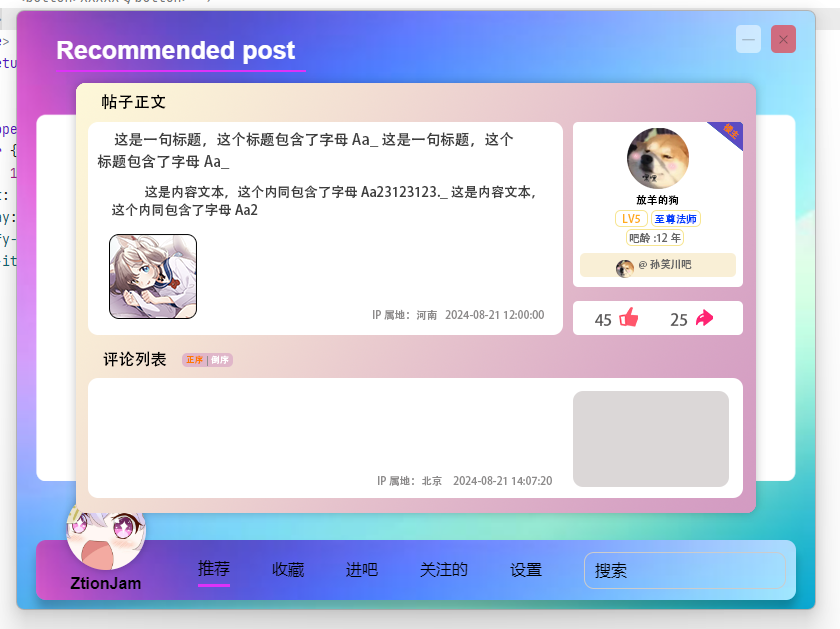
<style>
.page{position:relative;width:840px;height:629px;background:#ffffff}
.page>*{position:absolute;margin:0}
.t1{font:16px "AdobeHeitiStd-Regular";color:#010001}
.t2{font:8.7px "AdobeHeitiStd-Regular";color:#ff7800}
.t3{font:14.7px/22.7px "AdobeHeitiStd-Regular";color:#3e3e3e}
.t4{font:13.3px/18.7px "AdobeHeitiStd-Regular";color:#3e3e3e}
.t5{font:10.7px "AdobeHeitiStd-Regular";color:#000000}
.t6{font:10.7px "AdobeHeitiStd-Regular";color:#ffac1b}
.t7{font:10.7px "AdobeHeitiStd-Regular";color:#003cfe}
.t8{font:10.7px "AdobeHeitiStd-Regular";color:#666666}
.t9{font:10.7px "AdobeHeitiStd-Regular";color:#8d8b8b}
.t10{font:12px "AdobeHeitiStd-Regular";color:#595757}
.t11{font:8.5px "AdobeHeitiStd-Regular";color:#ff7800}
.t12{font:8.5px "AdobeHeitiStd-Regular";color:#ffffff}
</style>
<div class="page">
<p class="t1" style="left:102px;top:94px;width:64px;height:16px">帖子正文</p>
<p class="t2" style="left:723px;top:123px;width:16px;height:17px;rotate:41deg">楼主</p>
<p class="t3" style="left:97px;top:132px;width:417px;height:37px">这是一句标题，这个标题包含了字母Aa_这是一句标题，这个<br>标题包含了字母Aa_</p>
<p class="t4" style="left:112px;top:185px;width:423px;height:32px">这是内容文本，这个内同包含了字母Aa23123123._这是内容文本，<br>这个内同包含了字母Aa2</p>
<p class="t5" style="left:636px;top:195px;width:43px;height:10px">放羊的狗</p>
<p class="t6" style="left:623px;top:214px;width:17px;height:9px">LV5</p>
<p class="t7" style="left:654px;top:214px;width:43px;height:10px">至尊法师</p>
<p class="t8" style="left:629px;top:232px;width:52px;height:11px">吧龄:12年</p>
<p class="t8" style="left:639px;top:259px;width:53px;height:10px">@孙笑川吧</p>
<p class="t9" style="left:373px;top:309px;width:64px;height:11px">IP属地：河南</p>
<p class="t9" style="left:445px;top:310px;width:99px;height:9px">2024-08-21 12:00:00</p>
<p class="t10" style="left:595px;top:314px;width:17px;height:12px">45</p>
<p class="t10" style="left:670px;top:313px;width:18px;height:13px">25</p>
<p class="t1" style="left:103px;top:351px;width:64px;height:16px">评论列表</p>
<p class="t11" style="left:186px;top:355px;width:17px;height:9px">正序</p>
<p class="t12" style="left:211px;top:355px;width:18px;height:9px">倒序</p>
<p class="t9" style="left:378px;top:475px;width:64px;height:11px">IP属地：北京</p>
<p class="t9" style="left:453px;top:476px;width:99px;height:9px">2024-08-21 14:07:20</p>
</div>
